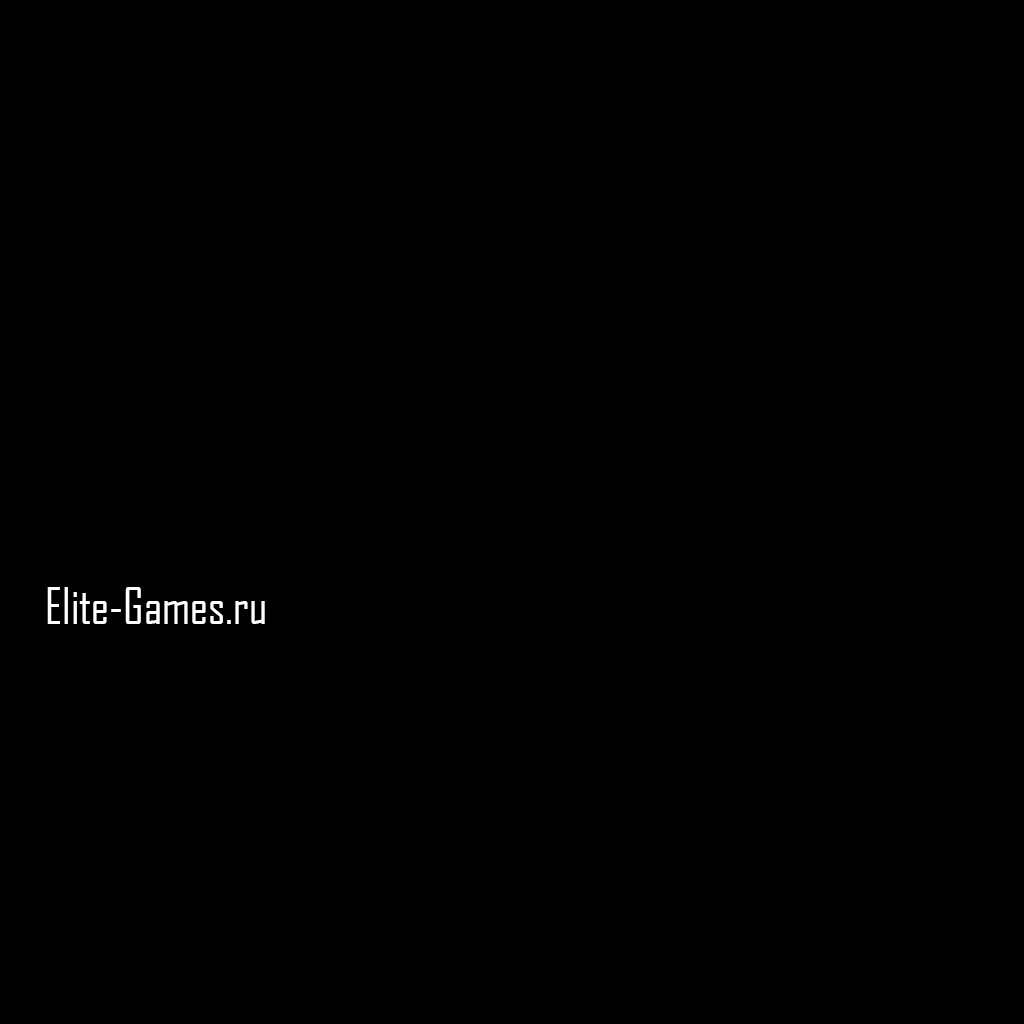
<style>
.page{position:relative;width:1024px;height:1024px;background:#000000}
.page>*{position:absolute;margin:0}
.t1{font:48px "AgencyFBCyrillic";color:#ffffff}
</style>
<div class="page">
<p class="t1" style="left:47px;top:587px;width:218px;height:37px">Elite-Games.ru</p>
</div>
